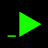
<style>
.page{position:relative;width:48px;height:48px;background:#000000}
.page>*{position:absolute;margin:0}
.t1{font:14px "ArialMT"}
</style>
<div class="page">
<p class="t1" style="left:7px;top:35px;width:9px;height:2px">_</p>
</div>
